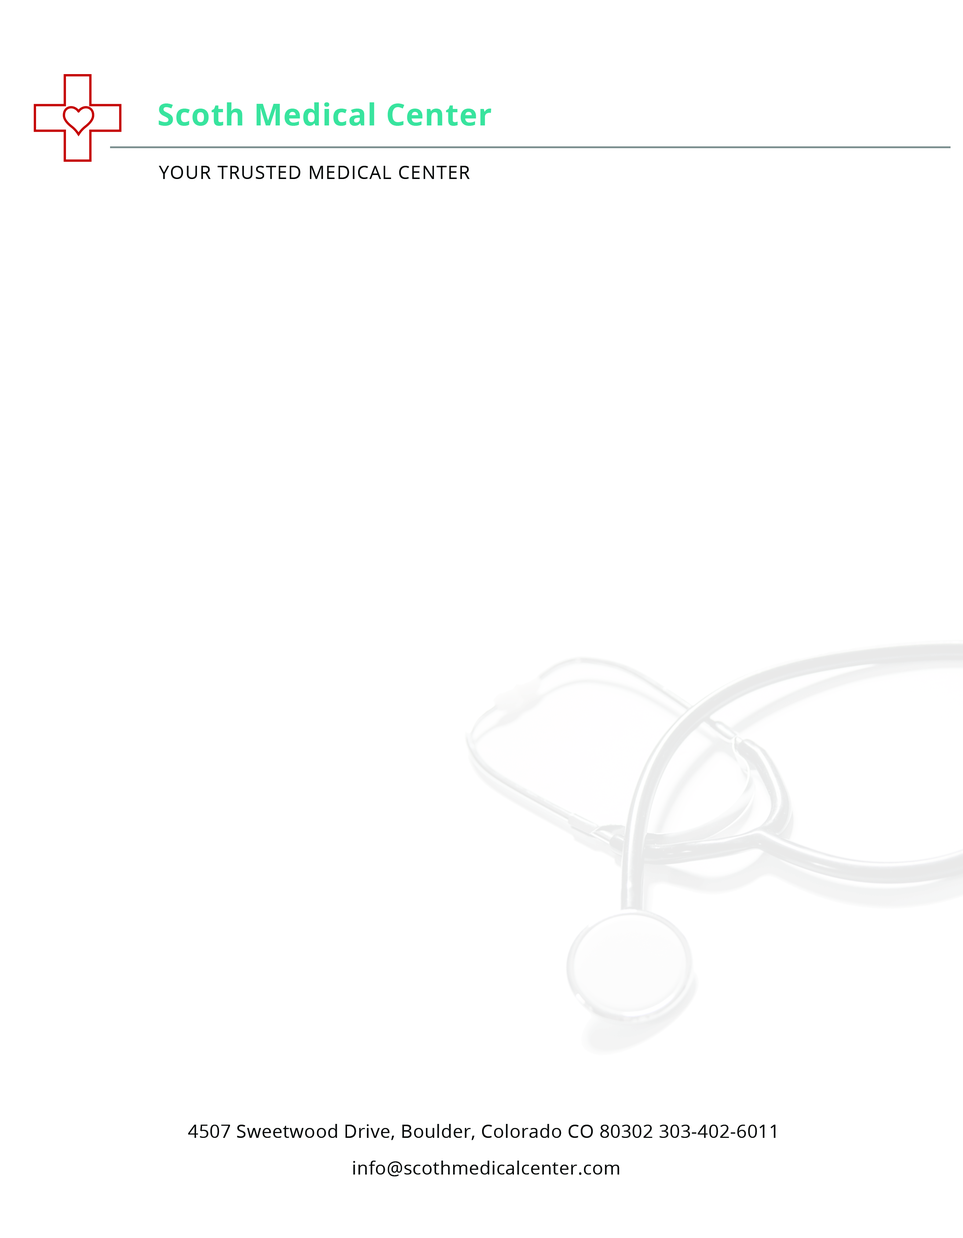
<style>
.page{position:relative;width:963px;height:1238px;background:#ffffff}
.page>*{position:absolute;margin:0}
.t1{font:30.6px "OpenSans-Bold";letter-spacing:0.02em;color:#38e49e}
.t2{font:18.3px "OpenSans";letter-spacing:0.05em;color:#060808}
.t3{font:18.3px/36.7px "OpenSans";letter-spacing:0.02em;color:#070909}
</style>
<div class="page">
<p class="t1" style="left:158px;top:102px;width:333px;height:24px">Scoth Medical Center</p>
<p class="t2" style="left:159px;top:166px;width:311px;height:13px">YOUR TRUSTED MEDICAL CENTER</p>
<p class="t3" style="left:188px;top:1124px;width:588px;height:53px;text-align:center">4507 Sweetwood Drive, Boulder, Colorado CO 80302 303-402-6011<br> info@scothmedicalcenter.com</p>
</div>
